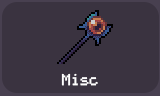
<style>
.page{position:relative;width:160px;height:96px;background:#3a3340}
.page>*{position:absolute;margin:0}
.t1{font:15px "LCDSolid";color:#ffffff}
</style>
<div class="page">
<p class="t1" style="left:61px;top:73px;width:37px;height:13px">Misc</p>
</div>
